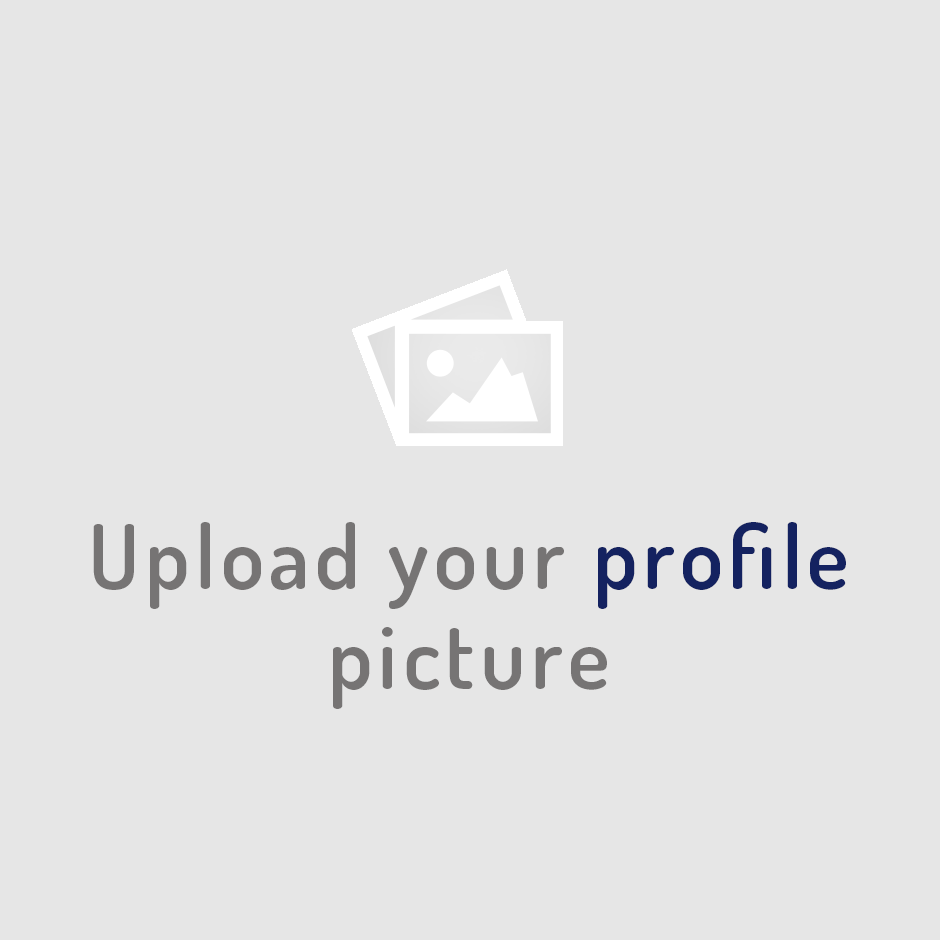
<style>
.page{position:relative;width:940px;height:940px;background:#e6e6e6}
.page>*{position:absolute;margin:0}
.t1{font:88.3px/100px "Dosis-SemiBold";letter-spacing:0.06em;color:#767474}
.t2{font:88.3px/100px "Dosis-SemiBold";letter-spacing:0.06em;color:#142260}
</style>
<div class="page">
<p class="t1" style="left:93px;top:522px;width:753px;height:187px;text-align:center">Upload your <span class="t2">profile<br></span>picture</p>
</div>
